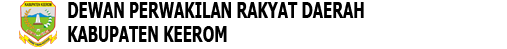
<style>
.page{position:relative;width:507px;height:49px;background:#ffffff}
.page>*{position:absolute;margin:0}
.t1{font:21.6px "Tahoma-Bold";color:#000000;scale:0.69 1}
</style>
<div class="page">
<p class="t1" style="left:68px;top:2px;width:296px;height:16px">DEWAN PERWAKILAN RAKYAT DAERAH</p>
<p class="t1" style="left:68px;top:26px;width:159px;height:16px">KABUPATEN KEEROM</p>
</div>
